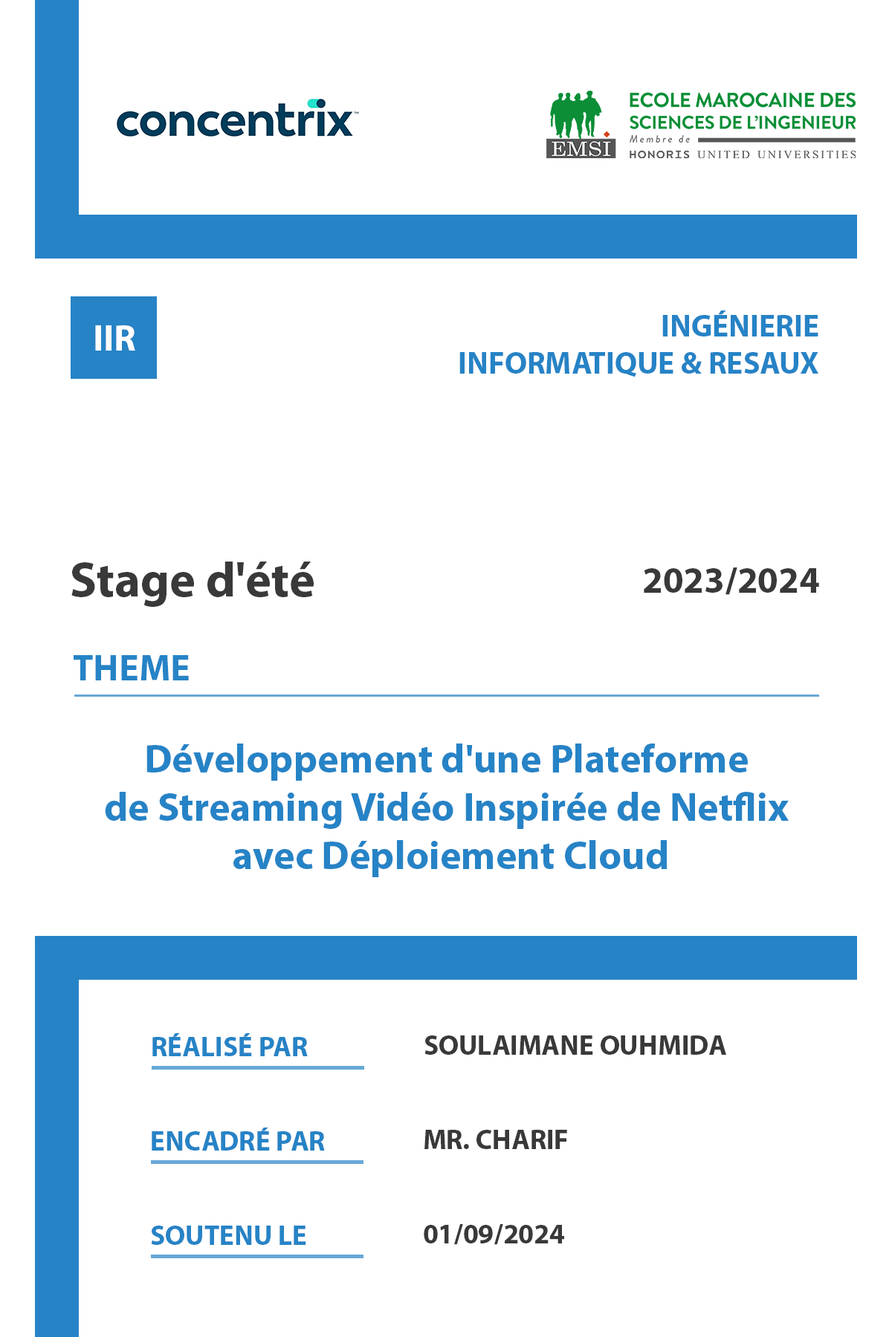
<style>
.page{position:relative;width:892px;height:1337px;background:#ffffff}
.page>*{position:absolute;margin:0}
.t1{font:31px "MyriadPro-Bold";color:#2683c6;text-transform:uppercase}
.t2{font:37.2px "MyriadPro-Bold";color:#ffffff}
.t3{font:49.5px "MyriadPro-Bold";color:#393939}
.t4{font:37.2px "MyriadPro-Bold";color:#393939}
.t5{font:37.2px "MyriadPro-Bold";color:#2683c6}
.t6{font:40.2px "MyriadPro-Bold";color:#2683c6}
.t7{font:27.9px "MyriadPro-Bold";color:#2683c6;text-transform:uppercase}
.t8{font:27.9px "MyriadPro-Bold";color:#393939;text-transform:uppercase}
</style>
<div class="page">
<p class="t1" style="left:459px;top:311px;width:359px;height:66px;text-align:right">Ingénierie<br>informatique &amp; resaux</p>
<p class="t2" style="left:95px;top:325px;width:40px;height:26px">IIR</p>
<p class="t3" style="left:71px;top:562px;width:243px;height:45px">Stage d'été</p>
<p class="t4" style="left:643px;top:568px;width:176px;height:27px">2023/2024</p>
<p class="t5" style="left:74px;top:655px;width:115px;height:26px">THEME</p>
<p class="t6" style="left:105px;top:744px;width:683px;height:133px;text-align:center">Développement d'une Plateforme <br>de Streaming Vidéo Inspirée de Netflix <br>avec Déploiement Cloud</p>
<p class="t7" style="left:152px;top:1034px;width:156px;height:23px">Réalisé Par</p>
<p class="t8" style="left:424px;top:1036px;width:302px;height:19px">Soulaimane Ouhmida</p>
<p class="t7" style="left:152px;top:1128px;width:173px;height:23px">Encadré Par</p>
<p class="t8" style="left:424px;top:1130px;width:143px;height:19px">Mr. Charif</p>
<p class="t7" style="left:151px;top:1226px;width:155px;height:19px">Soutenu le</p>
<p class="t8" style="left:424px;top:1224px;width:140px;height:21px">01/09/2024</p>
</div>
